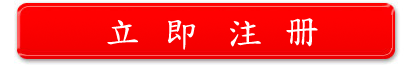
<style>
.page{position:relative;width:410px;height:72px}
.page>*{position:absolute;margin:0}
.t1{font:36px "DFKaiShu-SB-Estd-BF";color:#ffffff}
</style>
<div class="page">
<p class="t1" style="left:107px;top:20px;width:31px;height:25px">立</p>
<p class="t1" style="left:168px;top:20px;width:28px;height:30px">即</p>
<p class="t1" style="left:230px;top:20px;width:31px;height:27px">注</p>
<p class="t1" style="left:286px;top:18px;width:32px;height:29px">册</p>
</div>
